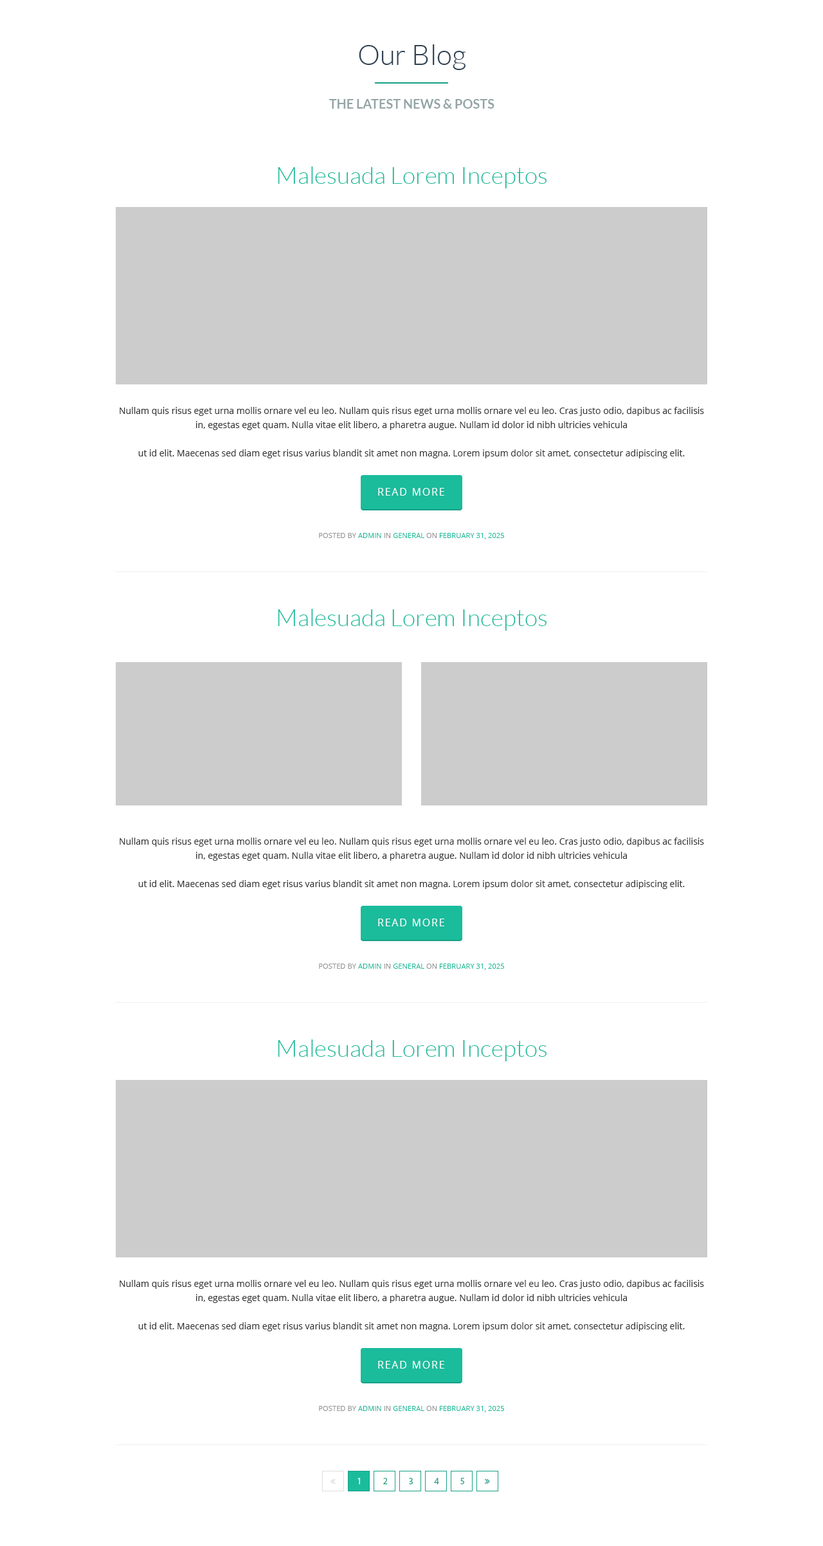
<style>
.page{position:relative;width:823px;height:1546px;background:#ffffff}
.page>*{position:absolute;margin:0}
.t1{font:28.3px "Lato-Light";color:#2e4052}
.t2{font:12.9px "Lato-Bold";color:#95a5a6}
.t3{font:23.8px "Lato-Light";color:#1abc9c}
.t4{font:9px/14.1px "OpenSans";color:#333333}
.t5{font:10.3px "OpenSans";letter-spacing:0.11em;color:#ffffff}
.t6{font:7.2px "OpenSans";color:#1abc9c}
.t7{font:7.2px "OpenSans";color:#959595}
.t8{font:9px "MyriadPro-Regular";color:#ffffff}
.t9{font:9px "MyriadPro-Regular";color:#16a085}
</style>
<div class="page">
<p class="t1" style="left:359px;top:44px;width:107px;height:26px">Our Blog</p>
<p class="t2" style="left:329px;top:99px;width:165px;height:10px">THE LATEST NEWS &amp; POSTS</p>
<p class="t3" style="left:278px;top:166px;width:268px;height:22px">Malesuada Lorem Inceptos</p>
<p class="t4" style="left:120px;top:407px;width:584px;height:51px;text-align:center">Nullam quis risus eget urna mollis ornare vel eu leo. Nullam quis risus eget urna mollis ornare vel eu leo. Cras justo odio, dapibus ac facilisis in, egestas eget quam. Nulla vitae elit libero, a pharetra augue. Nullam id dolor id nibh ultricies vehicula<br><br>ut id elit. Maecenas sed diam eget risus varius blandit sit amet non magna. Lorem ipsum dolor sit amet, consectetur adipiscing elit.</p>
<p class="t5" style="left:378px;top:488px;width:66px;height:8px">READ MORE</p>
<p class="t6" style="left:319px;top:533px;width:185px;height:6px"><span class="t7">POSTED BY </span>ADMIN <span class="t7">IN </span>GENERAL <span class="t7">ON </span>FEBRUARY 31, 2025</p>
<p class="t3" style="left:278px;top:609px;width:268px;height:22px">Malesuada Lorem Inceptos</p>
<p class="t4" style="left:120px;top:838px;width:584px;height:51px;text-align:center">Nullam quis risus eget urna mollis ornare vel eu leo. Nullam quis risus eget urna mollis ornare vel eu leo. Cras justo odio, dapibus ac facilisis in, egestas eget quam. Nulla vitae elit libero, a pharetra augue. Nullam id dolor id nibh ultricies vehicula<br><br>ut id elit. Maecenas sed diam eget risus varius blandit sit amet non magna. Lorem ipsum dolor sit amet, consectetur adipiscing elit.</p>
<p class="t5" style="left:378px;top:919px;width:66px;height:7px">READ MORE</p>
<p class="t6" style="left:319px;top:964px;width:185px;height:6px"><span class="t7">POSTED BY </span>ADMIN <span class="t7">IN </span>GENERAL <span class="t7">ON </span>FEBRUARY 31, 2025</p>
<p class="t3" style="left:278px;top:1040px;width:268px;height:21px">Malesuada Lorem Inceptos</p>
<p class="t4" style="left:120px;top:1280px;width:584px;height:51px;text-align:center">Nullam quis risus eget urna mollis ornare vel eu leo. Nullam quis risus eget urna mollis ornare vel eu leo. Cras justo odio, dapibus ac facilisis in, egestas eget quam. Nulla vitae elit libero, a pharetra augue. Nullam id dolor id nibh ultricies vehicula<br><br>ut id elit. Maecenas sed diam eget risus varius blandit sit amet non magna. Lorem ipsum dolor sit amet, consectetur adipiscing elit.</p>
<p class="t5" style="left:378px;top:1361px;width:66px;height:8px">READ MORE</p>
<p class="t6" style="left:319px;top:1406px;width:185px;height:6px"><span class="t7">POSTED BY </span>ADMIN <span class="t7">IN </span>GENERAL <span class="t7">ON </span>FEBRUARY 31, 2025</p>
<p class="t8" style="left:357px;top:1478px;width:3px;height:6px">1</p>
<p class="t9" style="left:383px;top:1478px;width:5px;height:6px">2</p>
<p class="t9" style="left:409px;top:1478px;width:4px;height:6px">3</p>
<p class="t9" style="left:434px;top:1478px;width:5px;height:6px">4</p>
<p class="t9" style="left:460px;top:1478px;width:4px;height:6px">5</p>
</div>
